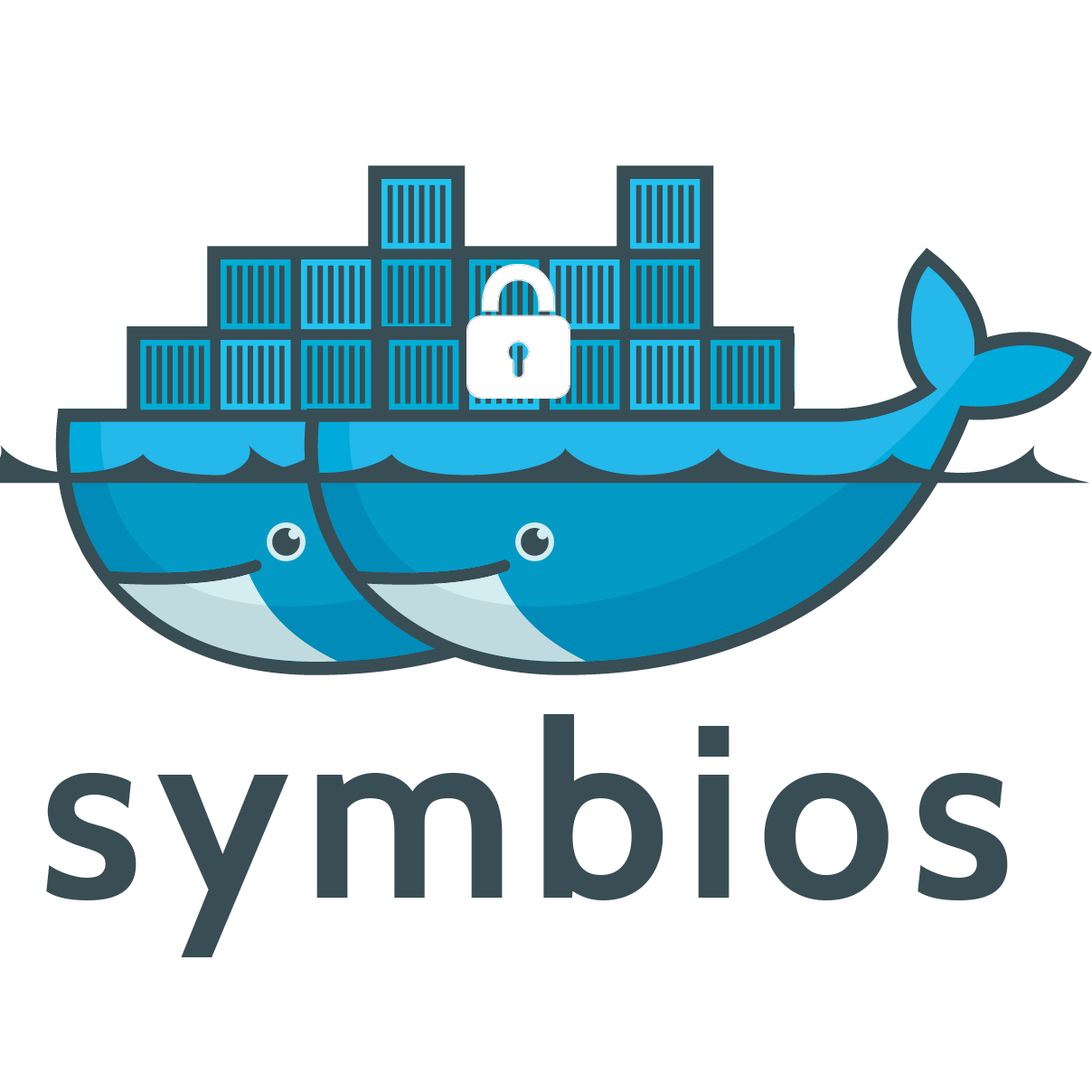
<style>
.page{position:relative;width:1092px;height:1092px;background:#ffffff}
.page>*{position:absolute;margin:0}
.t1{font:244.8px "Cabin-Bold";letter-spacing:0.06em;color:#394d54}
</style>
<div class="page">
<p class="t1" style="left:46px;top:714px;width:962px;height:243px">symbios</p>
</div>
